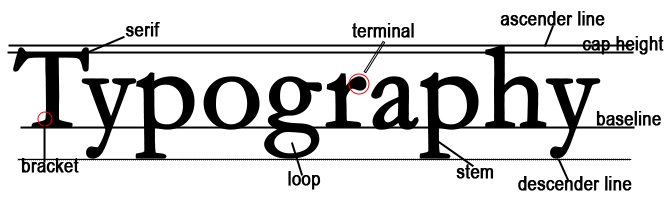
<style>
.page{position:relative;width:667px;height:202px;background:#ffffff}
.page>*{position:absolute;margin:0}
.t1{font:12px "ArialNarrow";color:#000000;font-weight:bold}
.t2{font:20px "ArialNarrow";color:#000000;font-weight:bold}
.t3{font:120px "Garamond";color:#000000;font-weight:bold}
</style>
<div class="page">
<p class="t1" style="left:500px;top:11px;width:105px;height:15px">ascender line</p>
<p class="t2" style="left:125px;top:22px;width:35px;height:15px">serif</p>
<p class="t2" style="left:352px;top:23px;width:62px;height:15px">terminal</p>
<p class="t2" style="left:582px;top:36px;width:82px;height:19px">cap height</p>
<p class="t3" style="left:13px;top:45px;width:588px;height:114px">Typography</p>
<p class="t2" style="left:596px;top:111px;width:65px;height:15px">baseline</p>
<p class="t1" style="left:21px;top:158px;width:58px;height:15px">bracket</p>
<p class="t2" style="left:288px;top:171px;width:33px;height:19px">loop</p>
<p class="t1" style="left:456px;top:164px;width:38px;height:15px">stem</p>
<p class="t1" style="left:518px;top:176px;width:114px;height:15px">descender line</p>
</div>
